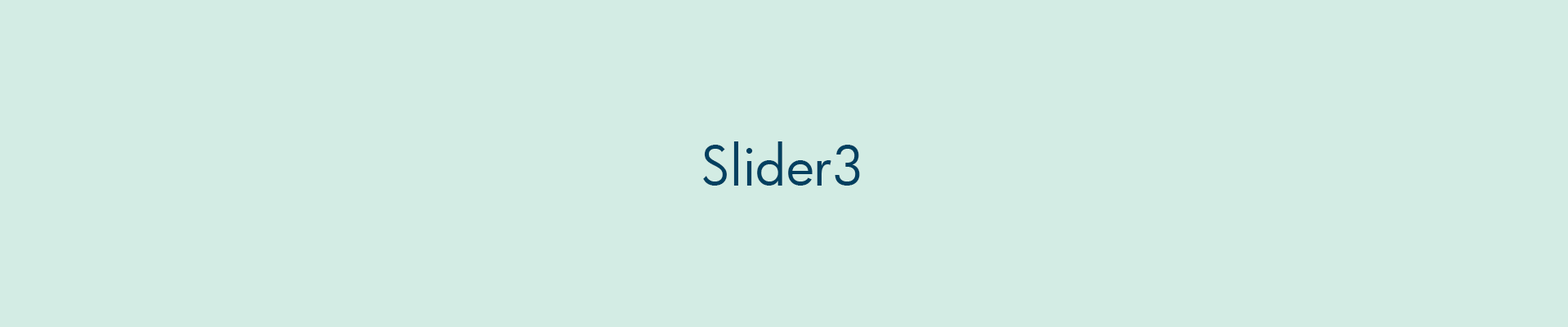
<style>
.page{position:relative;width:1568px;height:327px;background:#d3ece4}
.page>*{position:absolute;margin:0}
.t1{font:53.1px "Futura-Book";color:#014060}
</style>
<div class="page">
<p class="t1" style="left:703px;top:141px;width:157px;height:44px">Slider3</p>
</div>
